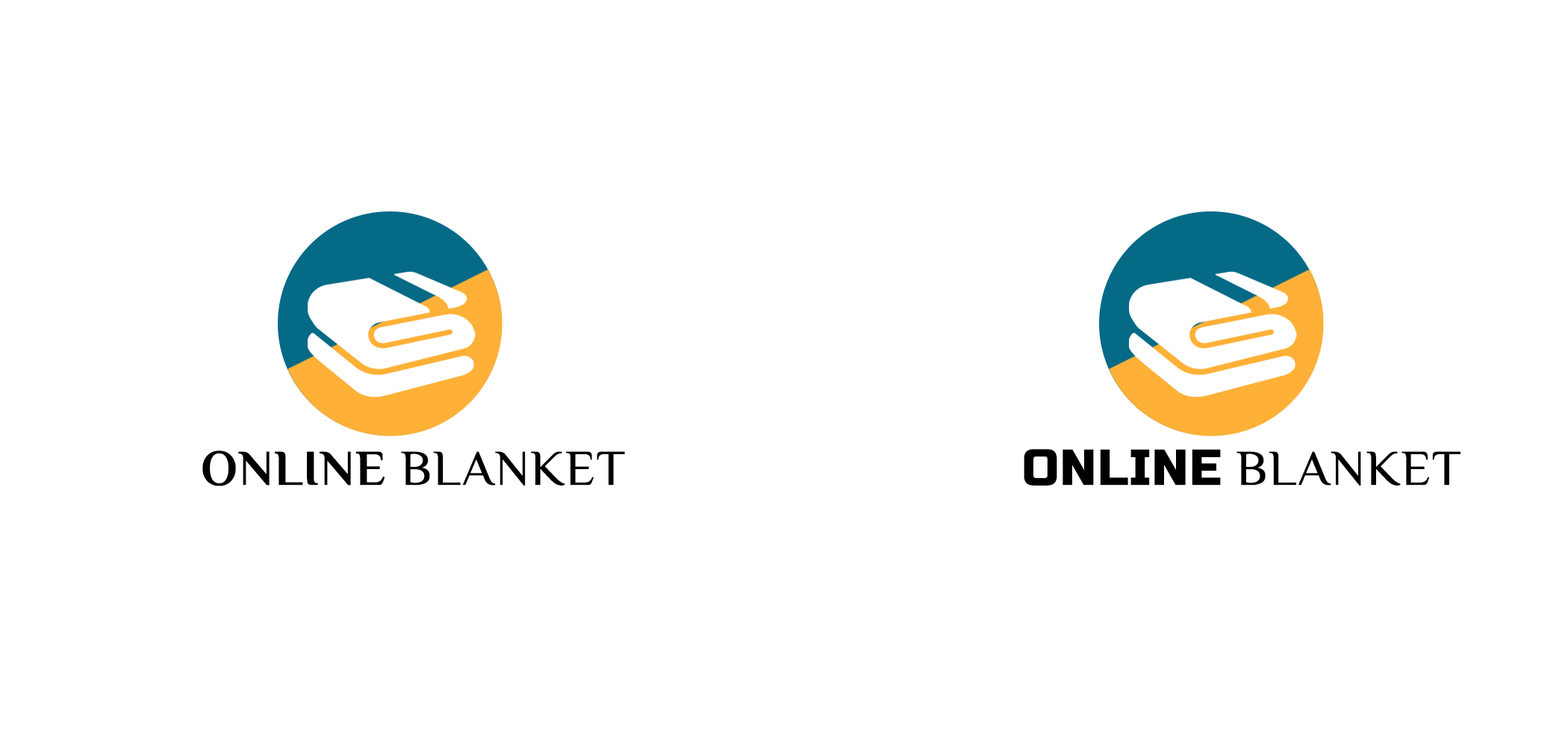
<style>
.page{position:relative;width:1568px;height:747px;background:#ffffff}
.page>*{position:absolute;margin:0}
.t1{font:49.8px "ElMessiri-Regular";color:#000000;font-weight:bold}
.t2{font:49.8px "RussoOne-Regular";color:#000000;font-weight:bold}
.t3{font:49.8px "ElMessiri-Bold";color:#000000;font-weight:bold}
</style>
<div class="page">
<p class="t1" style="left:1024px;top:449px;width:436px;height:36px"><span class="t2">ONLINE </span>BLANKET</p>
<p class="t1" style="left:202px;top:450px;width:423px;height:36px"><span class="t3">ONLINE </span>BLANKET</p>
</div>
